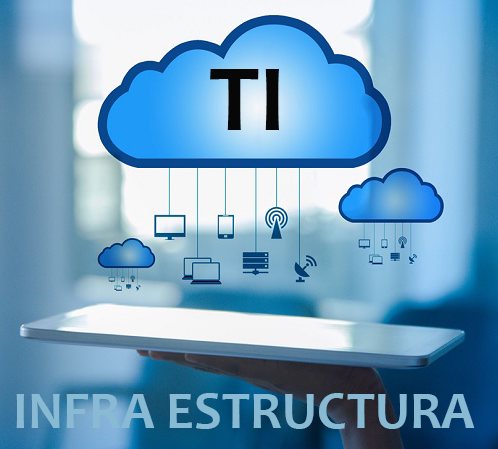
<style>
.page{position:relative;width:498px;height:449px}
.page>*{position:absolute;margin:0}
.t1{font:96px "Candara-Bold";color:#070707}
.t2{font:53.3px "Candara-Bold";color:#88bad3}
</style>
<div class="page">
<p class="t1" style="left:210px;top:69px;width:69px;height:61px">TI</p>
<p class="t2" style="left:16px;top:393px;width:459px;height:36px">INFRA ESTRUCTURA</p>
</div>
